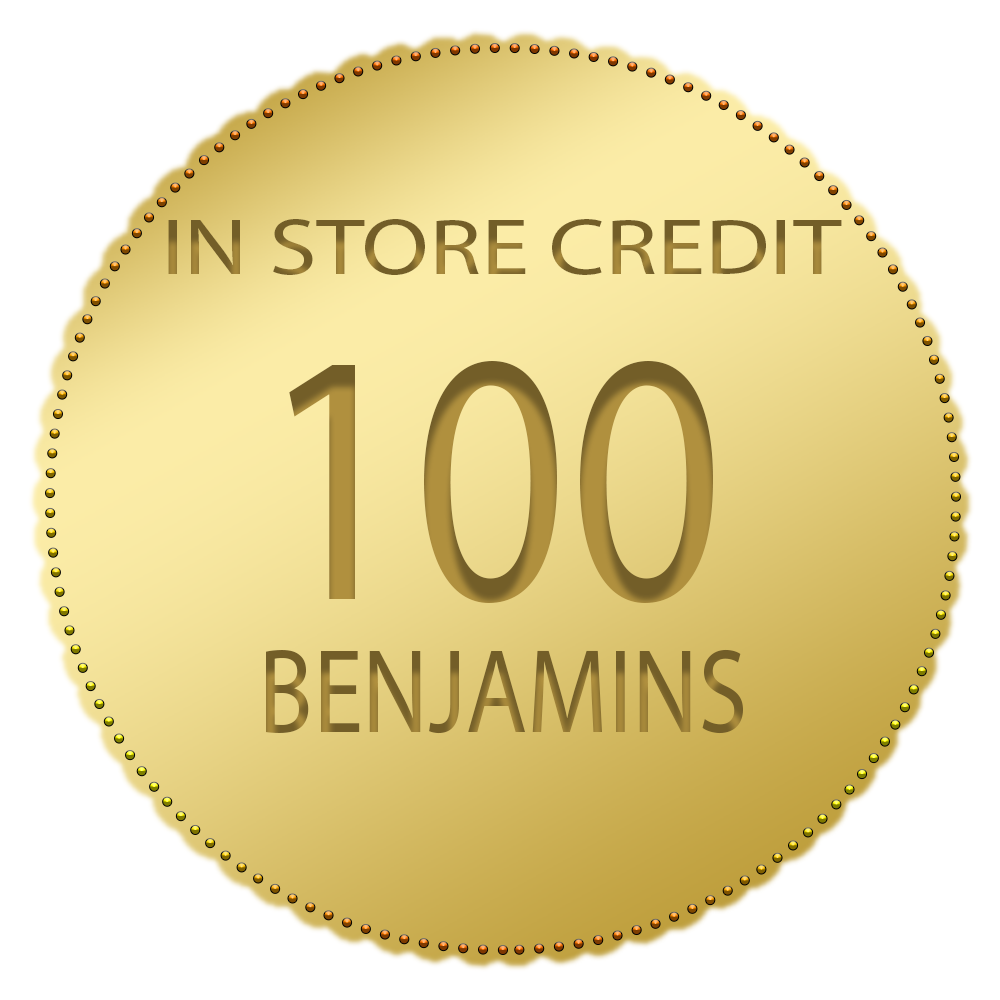
<style>
.page{position:relative;width:1000px;height:1000px;background:#ffffff}
.page>*{position:absolute;margin:0}
.t1{font:80px "MyriadPro-Regular";scale:1.21 1}
.t2{font:360.4px "MyriadPro-Regular";color:#b0903e;scale:0.84 1}
.t3{font:120px "MyriadPro-Regular";scale:0.84 1}
</style>
<div class="page">
<p class="t1" style="left:168px;top:219px;width:674px;height:56px">IN STORE CREDIT</p>
<p class="t2" style="left:289px;top:361px;width:424px;height:242px">100</p>
<p class="t3" style="left:266px;top:649px;width:477px;height:85px">BENJAMINS</p>
</div>
